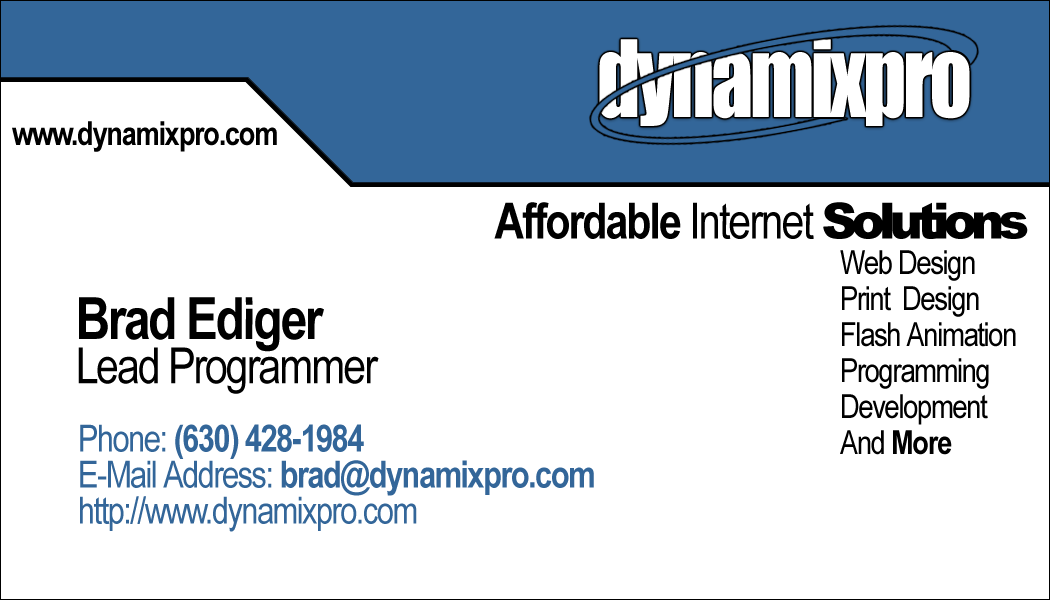
<style>
.page{position:relative;width:1050px;height:600px;background:#ffffff}
.page>*{position:absolute;margin:0}
.t1{font:98.5px "Impact";letter-spacing:-0.04em;color:#ffffff;scale:0.85 1}
.t2{font:33.3px "ArialNarrow-Bold";letter-spacing:-0.04em;color:#000000}
.t3{font:50px "ArialNarrow-Bold";letter-spacing:-0.04em;color:#000000}
.t4{font:50px "ArialNarrow";letter-spacing:-0.04em;color:#000000}
.t5{font:50px "Arial-Black";letter-spacing:-0.12em;color:#000000}
.t6{font:33.3px/36px "ArialNarrow";letter-spacing:-0.04em;color:#000000}
.t7{font:33.3px/44.4px "ArialNarrow";letter-spacing:-0.04em;color:#000000}
.t8{font:33.3px/36px "ArialNarrow-Bold";letter-spacing:-0.04em;color:#000000}
.t9{font:50px/44.4px "ArialNarrow";letter-spacing:-0.04em;color:#000000}
.t10{font:58.3px/44.4px "ArialNarrow-Bold";letter-spacing:-0.04em;color:#000000}
.t11{font:37.5px/36px "ArialNarrow";letter-spacing:-0.04em;color:#336699}
.t12{font:37.5px/36px "ArialNarrow-Bold";letter-spacing:-0.04em;color:#336699}
</style>
<div class="page">
<p class="t1" style="left:599px;top:39px;width:371px;height:87px">dynamixpro</p>
<p class="t2" style="left:12px;top:121px;width:265px;height:31px">www.dynamixpro.com</p>
<p class="t3" style="left:494px;top:202px;width:534px;height:37px">Affordable <span class="t4">Internet </span><span class="t5">Solutions</span></p>
<p class="t6" style="left:840px;top:250px;width:176px;height:205px"><span class="t7">Web Design<br></span>Print  Design<br>Flash Animation<br>Programming<br>Development<br>And <span class="t8">More</span></p>
<p class="t9" style="left:78px;top:297px;width:301px;height:97px"><span class="t10">Brad Ediger<br></span>Lead Programmer</p>
<p class="t11" style="left:80px;top:424px;width:514px;height:108px">Phone: <span class="t12">(630) 428-1984<br></span>E-Mail Address: <span class="t12">brad@dynamixpro.com<br></span>http://www.dynamixpro.com</p>
</div>
